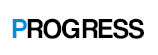
<style>
.page{position:relative;width:158px;height:55px;background:#ffffff}
.page>*{position:absolute;margin:0}
.t1{font:28px "CoolveticaRg-Regular";color:#000000}
.t2{font:28px "CoolveticaRg-Regular";color:#008bd7}
</style>
<div class="page">
<p class="t1" style="left:12px;top:18px;width:132px;height:21px"><span class="t2">P</span>ROGRESS</p>
</div>
